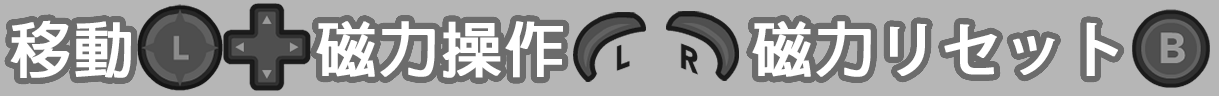
<style>
.page{position:relative;width:1219px;height:96px;background:#b6b6b6}
.page>*{position:absolute;margin:0}
.t1{font:60px "AdobeFanHeitiStd-Bold";letter-spacing:0.025em;color:#ffffff;font-weight:bold}
</style>
<div class="page">
<p class="t1" style="left:10px;top:20px;width:121px;height:58px">移動</p>
<p class="t1" style="left:316px;top:21px;width:247px;height:57px">磁力操作</p>
<p class="t1" style="left:752px;top:21px;width:366px;height:56px">磁力リセット</p>
</div>
